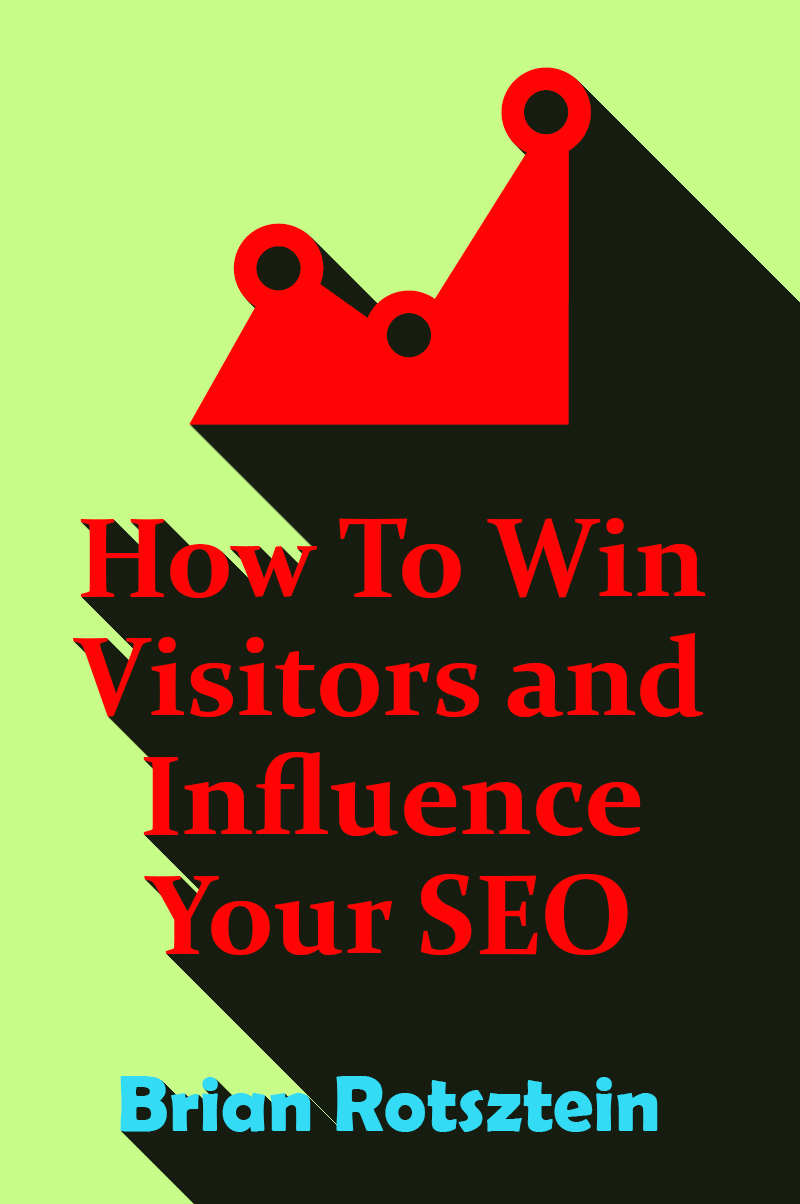
<style>
.page{position:relative;width:800px;height:1204px;background:#161c0f}
.page>*{position:absolute;margin:0}
.t1{font:112px/119px "Constantia-Bold";color:#ff0404}
.t2{font:80px "BerlinSansFBDemi-Bold";color:#33daf3}
</style>
<div class="page">
<p class="t1" style="left:73px;top:518px;width:633px;height:437px;text-align:center">How To Win Visitors and Influence Your SEO</p>
<p class="t2" style="left:120px;top:1076px;width:538px;height:56px">Brian Rotsztein</p>
</div>
